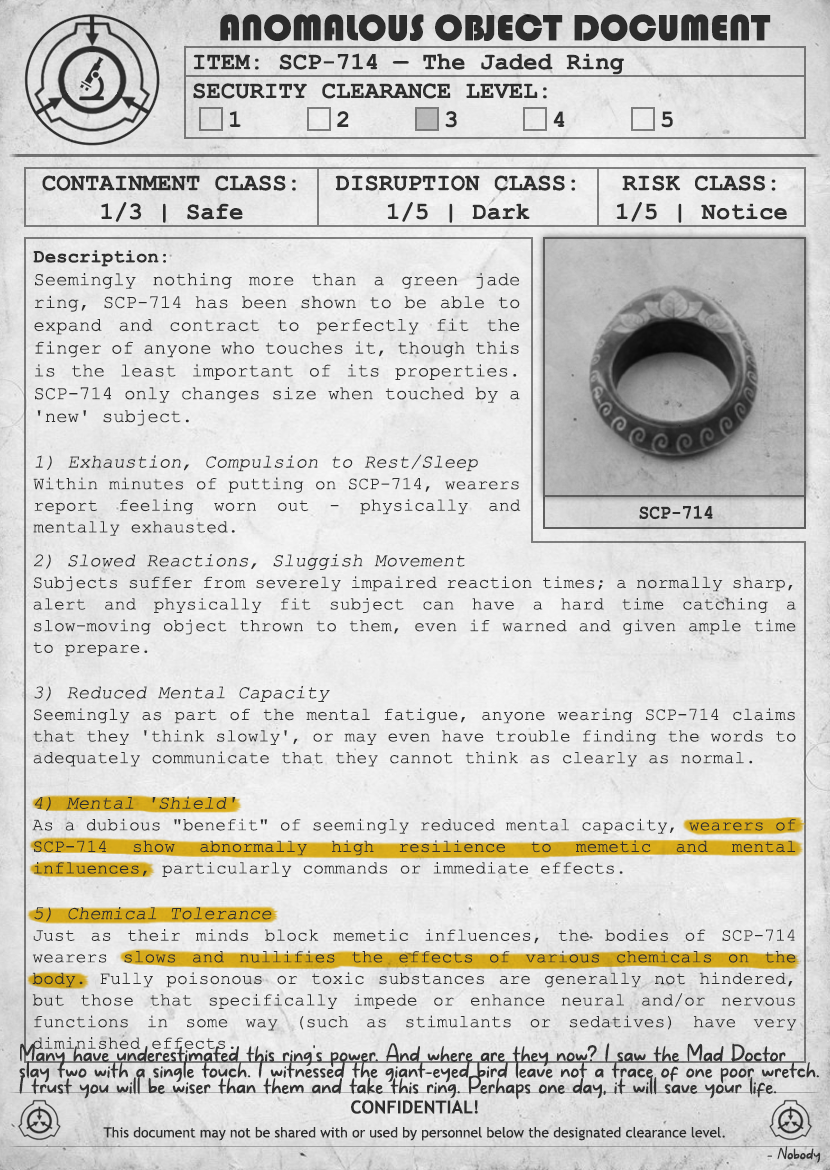
<style>
.page{position:relative;width:830px;height:1170px}
.page>*{position:absolute;margin:0}
.t1{font:38px "Bauhaus93";color:#333333;text-transform:uppercase}
.t2{font:24px "CourierNewPS-BoldMT";color:#333333}
.t3{font:24px "CourierNewPS-BoldMT";color:#333333;text-transform:uppercase}
.t4{font:19px "CourierNewPSMT";color:#333333}
.t5{font:19px "CourierNewPS-BoldMT";color:#333333}
.t6{font:19px "CourierNewPSMT";color:#333333;font-style:italic}
.t7{font:18px "CourierNewPSMT";color:#333333}
.t8{font:20.1px "CourierNewPS-BoldMT";color:#333333;scale:0.9 1}
.t9{font:26px/16px "MakanHatiCyrillicRegular";color:#333333}
.t10{font:14px/24px "TrebuchetMS";color:#333333}
.t11{font:18px/24px "TrebuchetMS-Bold";color:#333333}
.t12{font:18px "MakanHatiCyrillicRegular";color:#333333}
</style>
<div class="page">
<p class="t1" style="left:220px;top:14px;width:551px;height:27px">anomalous object document</p>
<p class="t2" style="left:193px;top:53px;width:480px;height:75px">ITEM: SCP-714 — The Jaded Ring<br><span class="t3">Security CLEARANCE LEVEL:</span> <br> 1   2   3   4   5</p>
<p class="t2" style="left:42px;top:175px;width:254px;height:48px;text-align:center">CONTAINMENT CLASS:<br>1/3 | Safe</p>
<p class="t2" style="left:335px;top:175px;width:241px;height:48px;text-align:center">DISRUPTION CLASS:<br>1/5 | Dark</p>
<p class="t2" style="left:617px;top:175px;width:170px;height:48px;text-align:center">RISK CLASS:<br>1/5 | Notice</p>
<p class="t4" style="left:33px;top:250px;width:488px;height:286px;text-align:justify"><span class="t5">Description:<br></span>Seemingly nothing more than a green jade ring, SCP-714 has been shown to be able to expand and contract to perfectly fit the finger of anyone who touches it, though this is the least important of its properties. SCP-714 only changes size when touched by a 'new' subject.<br><br><span class="t6">1) Exhaustion, Compulsion to Rest/Sleep<br></span><span class="t7">Within minutes of putting on SCP-714, wearers report feeling worn out - physically and mentally exhausted.</span></p>
<p class="t8" style="left:639px;top:505px;width:74px;height:15px">SCP-714</p>
<p class="t7" style="left:32px;top:554px;width:765px;height:495px;text-align:justify"><span class="t4"><br><br></span><span class="t6">2) Slowed Reactions, Sluggish Movement<br></span>Subjects suffer from severely impaired reaction times; a normally sharp, alert and physically fit subject can have a hard time catching a slow-moving object thrown to them, even if warned and given ample time to prepare. <br><br><span class="t6">3) Reduced Mental Capacity<br></span>Seemingly as part of the mental fatigue, anyone wearing SCP-714 claims that they 'think slowly', or may even have trouble finding the words to adequately communicate that they cannot think as clearly as normal. <br><br><span class="t6">4) Mental 'Shield'<br></span>As a dubious "benefit" of seemingly reduced mental capacity, wearers of SCP-714 show abnormally high resilience to memetic and mental influences, particularly commands or immediate effects. <br><br><span class="t6">5) Chemical Tolerance<br></span>Just as their minds block memetic influences, the bodies of SCP-714 wearers slows and nullifies the effects of various chemicals on the body. Fully poisonous or toxic substances are generally not hindered, but those that specifically impede or enhance neural and/or nervous functions in some way (such as stimulants or sedatives) have very diminished effects.</p>
<p class="t9" style="left:19px;top:1043px;width:800px;height:57px">Many have underestimated this ring's power. And where are they now? I saw the Mad Doctor slay two with a single touch. I witnessed the giant-eyed bird leave not a trace of one poor wretch. I trust you will be wiser than them and take this ring. Perhaps one day, it will save your life.</p>
<p class="t10" style="left:103px;top:1100px;width:622px;height:41px;text-align:center"><span class="t11">CONFIDENTIAL!<br></span>This document may not be shared with or used by personnel below the designated clearance level.</p>
<p class="t12" style="left:767px;top:1146px;width:53px;height:17px">- Nobody</p>
</div>
